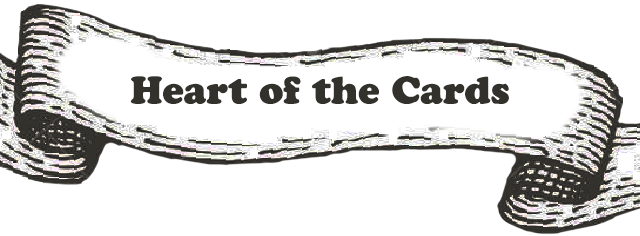
<style>
.page{position:relative;width:640px;height:236px;background:#ffffff}
.page>*{position:absolute;margin:0}
.t1{font:38.2px "CooperBlackStd";color:#32312c}
</style>
<div class="page">
<p class="t1" style="left:130px;top:76px;width:379px;height:28px">Heart of the Cards</p>
</div>
